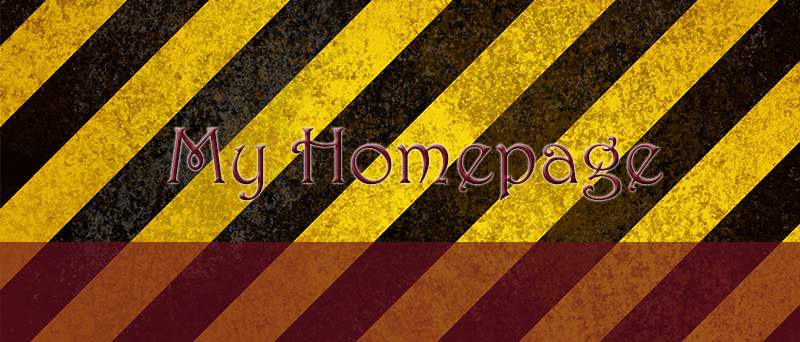
<style>
.page{position:relative;width:800px;height:342px}
.page>*{position:absolute;margin:0}
.t1{font:80px "Harrington"}
.t2{font:80px "Impact"}
</style>
<div class="page">
<p class="t1" style="left:167px;top:128px;width:496px;height:73px;text-align:center">My Homepage<br><span class="t2"><br>Homepage</span></p>
</div>
